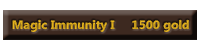
<style>
.page{position:relative;width:200px;height:50px;background:#ffffff}
.page>*{position:absolute;margin:0}
.t1{font:12px "LaoUI-Bold";color:#d9aa1c;scale:1.03 1}
</style>
<div class="page">
<p class="t1" style="left:12px;top:19px;width:177px;height:13px">Magic Immunity I     1500 gold</p>
</div>
